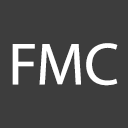
<style>
.page{position:relative;width:128px;height:128px;background:#3d3d3d}
.page>*{position:absolute;margin:0}
.t1{font:60px "MyriadPro-Regular";color:#ffffff}
</style>
<div class="page">
<p class="t1" style="left:12px;top:43px;width:106px;height:43px">FMC</p>
</div>
